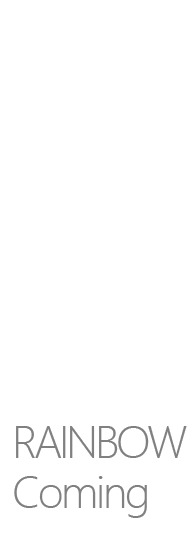
<style>
.page{position:relative;width:190px;height:550px;background:#ffffff}
.page>*{position:absolute;margin:0}
.t1{font:41.7px/50px "MicrosoftYaHeiUILight";letter-spacing:-0.075em;color:#808080}
.t2{font:41.7px/50px "MicrosoftYaHeiUILight";letter-spacing:-0.05em;color:#808080}
</style>
<div class="page">
<p class="t1" style="left:14px;top:426px;width:173px;height:92px">RAINBOW<br><span class="t2">Coming</span></p>
</div>
